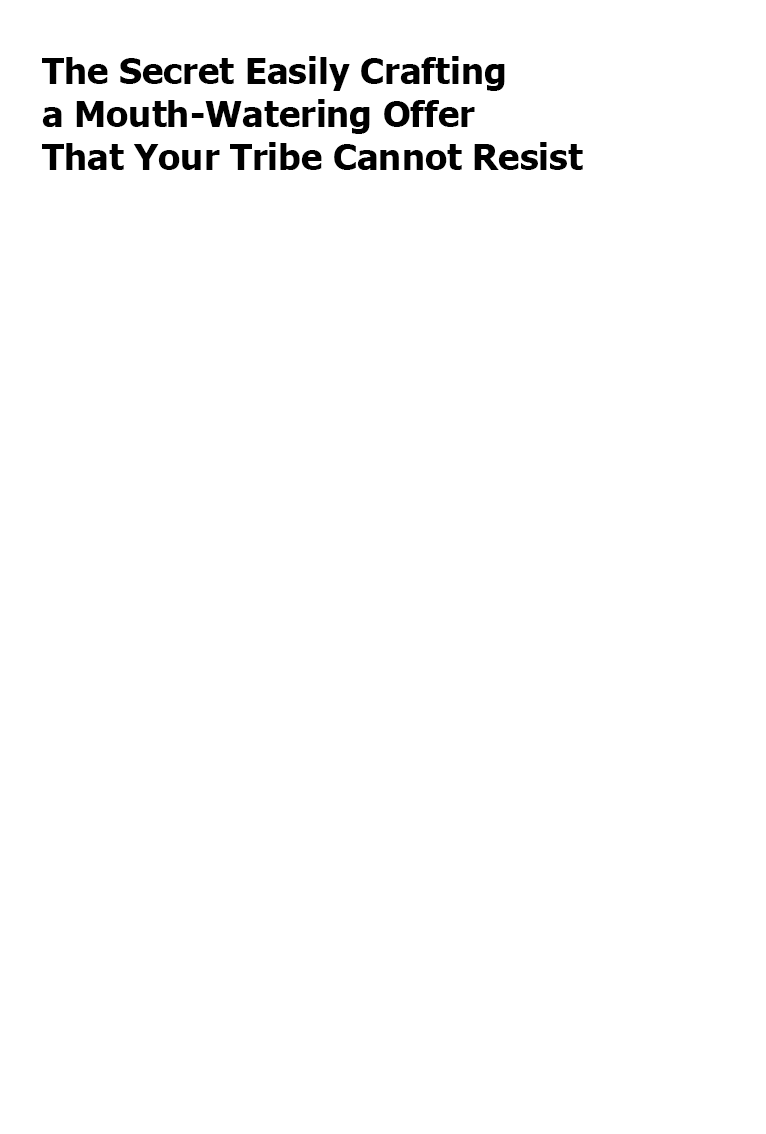
<style>
.page{position:relative;width:766px;height:1134px;background:#ffffff}
.page>*{position:absolute;margin:0}
.t1{font:36px "Tahoma-Bold";color:#000000}
</style>
<div class="page">
<p class="t1" style="left:42px;top:56px;width:541px;height:114px">The Secret Easily Crafting <br>a Mouth-Watering Offer<br>That Your Tribe Cannot Resist</p>
</div>
